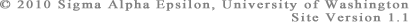
<style>
.page{position:relative;width:409px;height:22px;background:#ffffff}
.page>*{position:absolute;margin:0}
.t1{font:11.2px "TimesNewRomanPSMT";letter-spacing:0.1em;color:#7f7f7f;font-weight:bold;scale:1.25 1}
</style>
<div class="page">
<p class="t1" style="left:0px;top:0px;width:409px;height:11px">© 2010 Sigma Alpha Epsilon, University of Washington</p>
<p class="t1" style="left:292px;top:13px;width:116px;height:9px">Site Version 1.1</p>
</div>
